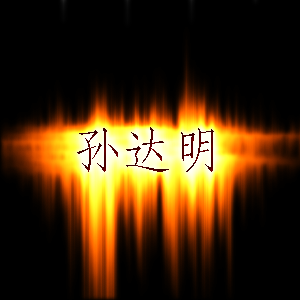
<style>
.page{position:relative;width:300px;height:300px;background:#000000}
.page>*{position:absolute;margin:0}
.t1{font:50px "STFangsong";color:#4d0000}
</style>
<div class="page">
<p class="t1" style="left:77px;top:127px;width:137px;height:45px">孙达明</p>
</div>
